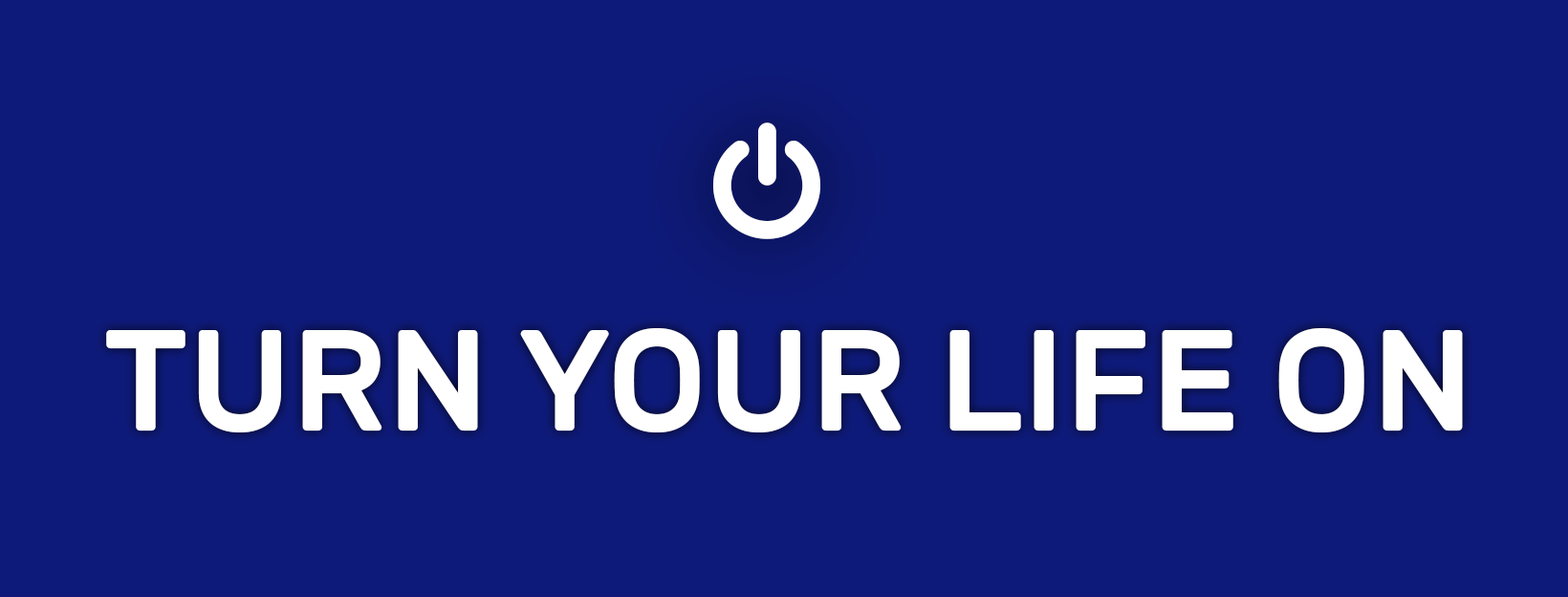
<style>
.page{position:relative;width:1568px;height:597px;background:#0e1a79}
.page>*{position:absolute;margin:0}
.t1{font:143.4px "Rubik-Medium";color:#ffffff;text-transform:uppercase}
</style>
<div class="page">
<p class="t1" style="left:106px;top:328px;width:1357px;height:104px">Turn your life on</p>
</div>
